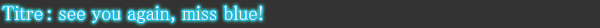
<style>
.page{position:relative;width:600px;height:28px;background:#333333}
.page>*{position:absolute;margin:0}
.t1{font:20px "MS-PMincho";color:#ffffff}
</style>
<div class="page">
<p class="t1" style="left:2px;top:5px;width:260px;height:18px">Titre : see you again, miss blue!</p>
</div>
